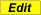
<style>
.page{position:relative;width:41px;height:15px;background:#fffc00}
.page>*{position:absolute;margin:0}
.t1{font:12px "Arial-BoldItalicMT";color:#000000}
</style>
<div class="page">
<p class="t1" style="left:8px;top:3px;width:24px;height:9px">Edit</p>
</div>
